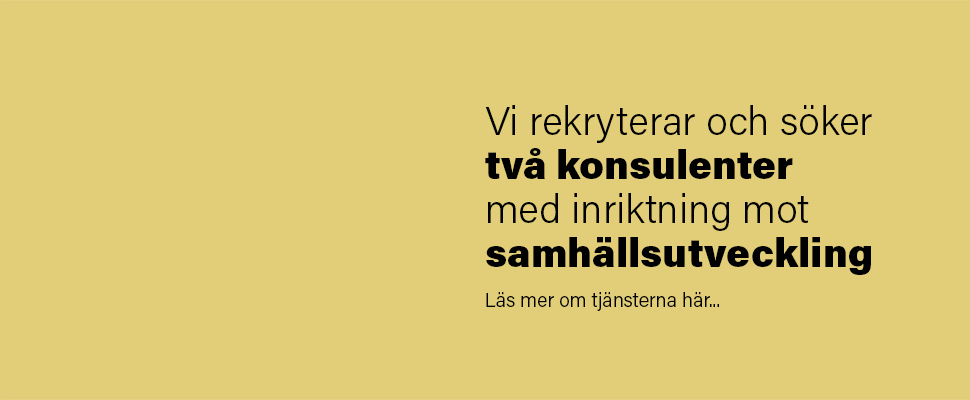
<style>
.page{position:relative;width:970px;height:400px;background:#e2ce79}
.page>*{position:absolute;margin:0}
.t1{font:20px/40px "AcuminPro-Light";color:#000000}
.t2{font:40px/44px "AcuminPro-Light";color:#010101}
.t3{font:40px/44px "AcuminPro-Black";color:#010101}
</style>
<div class="page">
<p class="t1" style="left:485px;top:105px;width:387px;height:206px"><span class="t2">Vi rekryterar och söker <br></span><span class="t3">två konsulenter<br></span><span class="t2">med inriktning mot<br></span><span class="t3">samhällsutveckling<br></span>Läs mer om tjänsterna här...</p>
</div>
